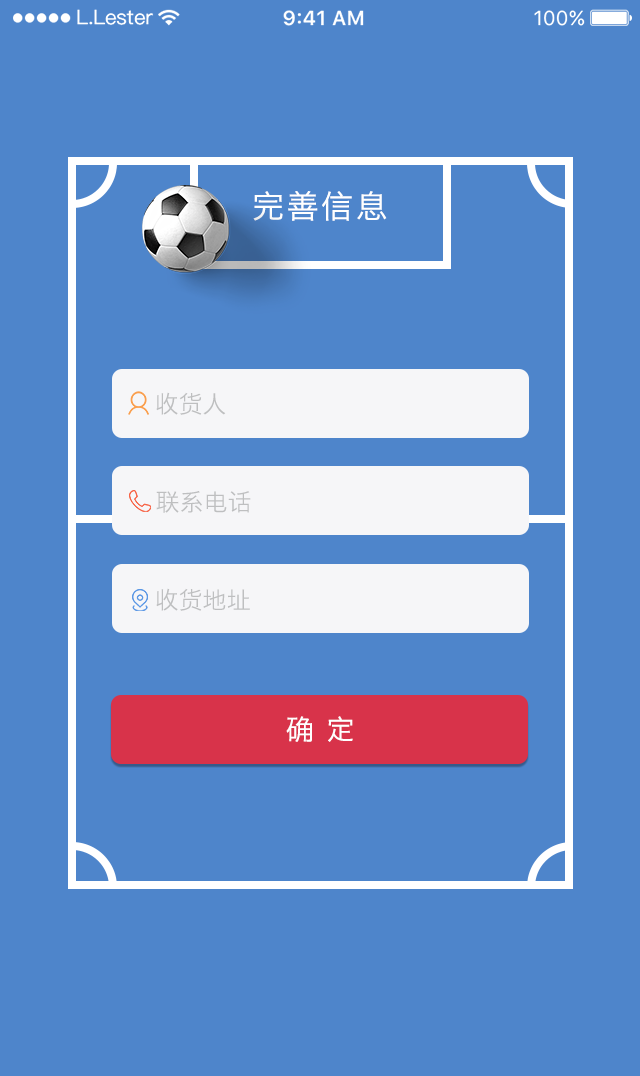
<style>
.page{position:relative;width:640px;height:1076px;background:#4e85cb}
.page>*{position:absolute;margin:0}
.t1{font:32px "HiraginoSansGB-W3";letter-spacing:0.08em;color:#ffffff}
.t2{font:24px "HiraginoSansGB-W3";color:#bebfc0}
.t3{font:28px "HiraginoSansGB-W3";letter-spacing:0.44em;color:#ffffff}
.t4{font:28px "HiraginoSansGB-W3";letter-spacing:0.3em;color:#ffffff}
</style>
<div class="page">
<p class="t1" style="left:253px;top:191px;width:134px;height:30px">完善信息</p>
<p class="t2" style="left:156px;top:392px;width:70px;height:23px">收货人</p>
<p class="t2" style="left:156px;top:491px;width:95px;height:22px">联系电话</p>
<p class="t2" style="left:156px;top:588px;width:94px;height:23px">收货地址</p>
<p class="t3" style="left:286px;top:716px;width:67px;height:26px"><span class="t4"> </span>确定</p>
</div>
